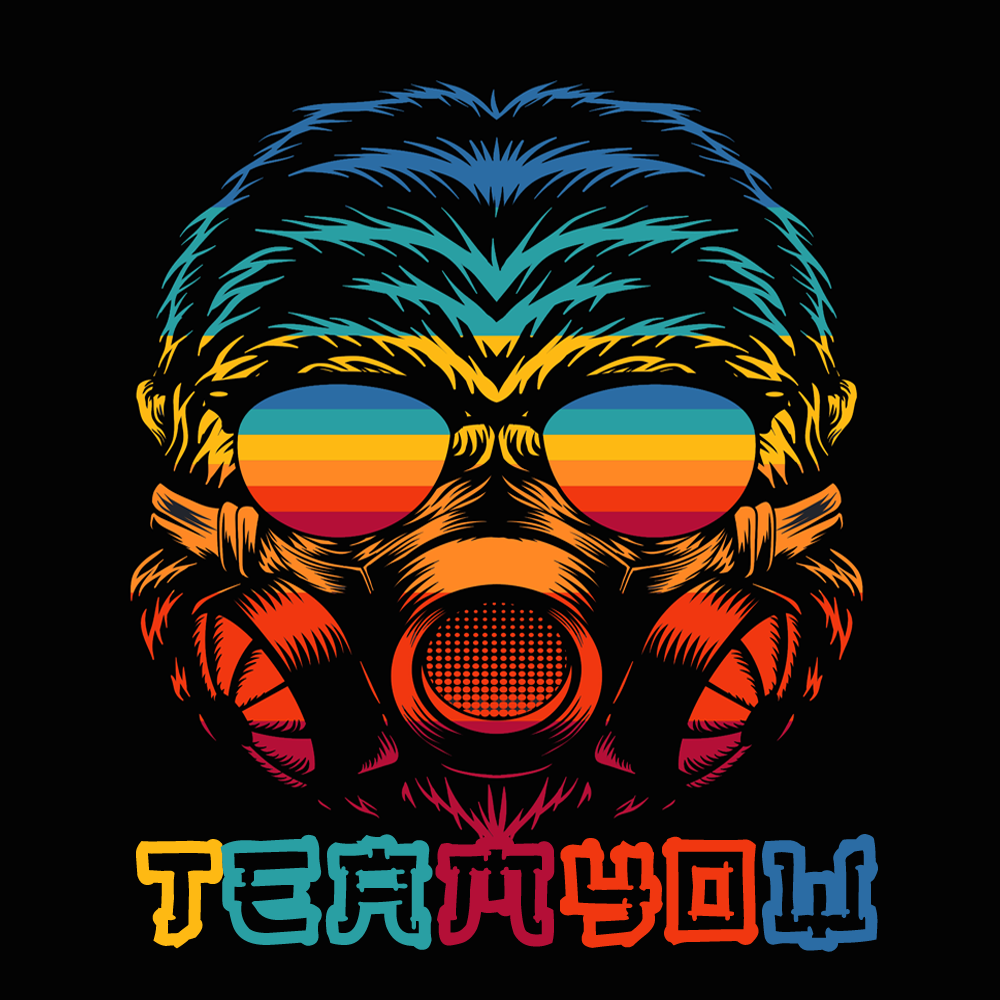
<style>
.page{position:relative;width:1000px;height:1000px;background:#030303}
.page>*{position:absolute;margin:0}
.t1{font:150px "OldJapanese";color:#299fa3}
.t2{font:150px "OldJapanese";color:#feb913}
.t3{font:150px "OldJapanese";color:#b40f37}
.t4{font:150px "OldJapanese";color:#f13710}
.t5{font:150px "OldJapanese";color:#2b6ca4}
</style>
<div class="page">
<p class="t1" style="left:136px;top:834px;width:742px;height:118px"><span class="t2">t</span>ea<span class="t3">m</span><span class="t4">yo</span><span class="t5">w</span></p>
</div>
